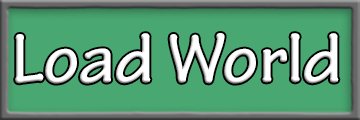
<style>
.page{position:relative;width:360px;height:120px;background:#49a771}
.page>*{position:absolute;margin:0}
.t1{font:74.2px "TektonPro-Bold";color:#ffffff}
</style>
<div class="page">
<p class="t1" style="left:15px;top:33px;width:324px;height:51px">Load World</p>
</div>
